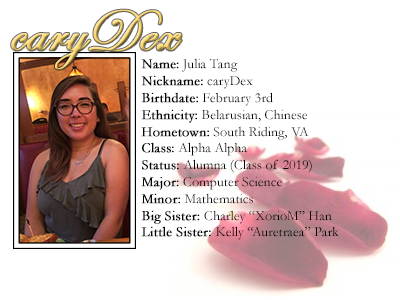
<style>
.page{position:relative;width:400px;height:300px;background:#ffffff}
.page>*{position:absolute;margin:0}
.t1{font:60px "EdwardianScriptITC";font-weight:bold}
.t2{font:14px "Garamond";color:#000000}
.t3{font:14px "Garamond";color:#000000;font-weight:bold}
</style>
<div class="page">
<p class="t1" style="left:11px;top:9px;width:171px;height:61px">caryDex</p>
<p class="t2" style="left:141px;top:58px;width:198px;height:182px"><span class="t3">Name:</span> Julia Tang<br><span class="t3">Nickname:</span> caryDex<br><span class="t3">Birthdate:</span> February 3rd<br><span class="t3">Ethnicity:</span> Belarusian, Chinese<br><span class="t3">Hometown:</span> South Riding, VA<br><span class="t3">Class:</span> Alpha Alpha<br><span class="t3">Status:</span> Alumna (Class of 2019)<br><span class="t3">Major:</span> Computer Science<br><span class="t3">Minor:</span> Mathematics<br><span class="t3">Big Sister: </span>Charley “XorioM” Han<br><span class="t3">Little Sister: </span>Kelly “Auretraea” Park</p>
</div>
